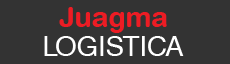
<style>
.page{position:relative;width:230px;height:64px;background:#333333}
.page>*{position:absolute;margin:0}
.t1{font:27.5px "HelveticaRoundedLT-Bold";color:#ed1c24}
.t2{font:27.9px "HelveticaCE-Regular";color:#ffffff}
</style>
<div class="page">
<p class="t1" style="left:59px;top:7px;width:108px;height:26px">Juagma</p>
<p class="t2" style="left:44px;top:36px;width:140px;height:20px">LOGISTICA</p>
</div>
